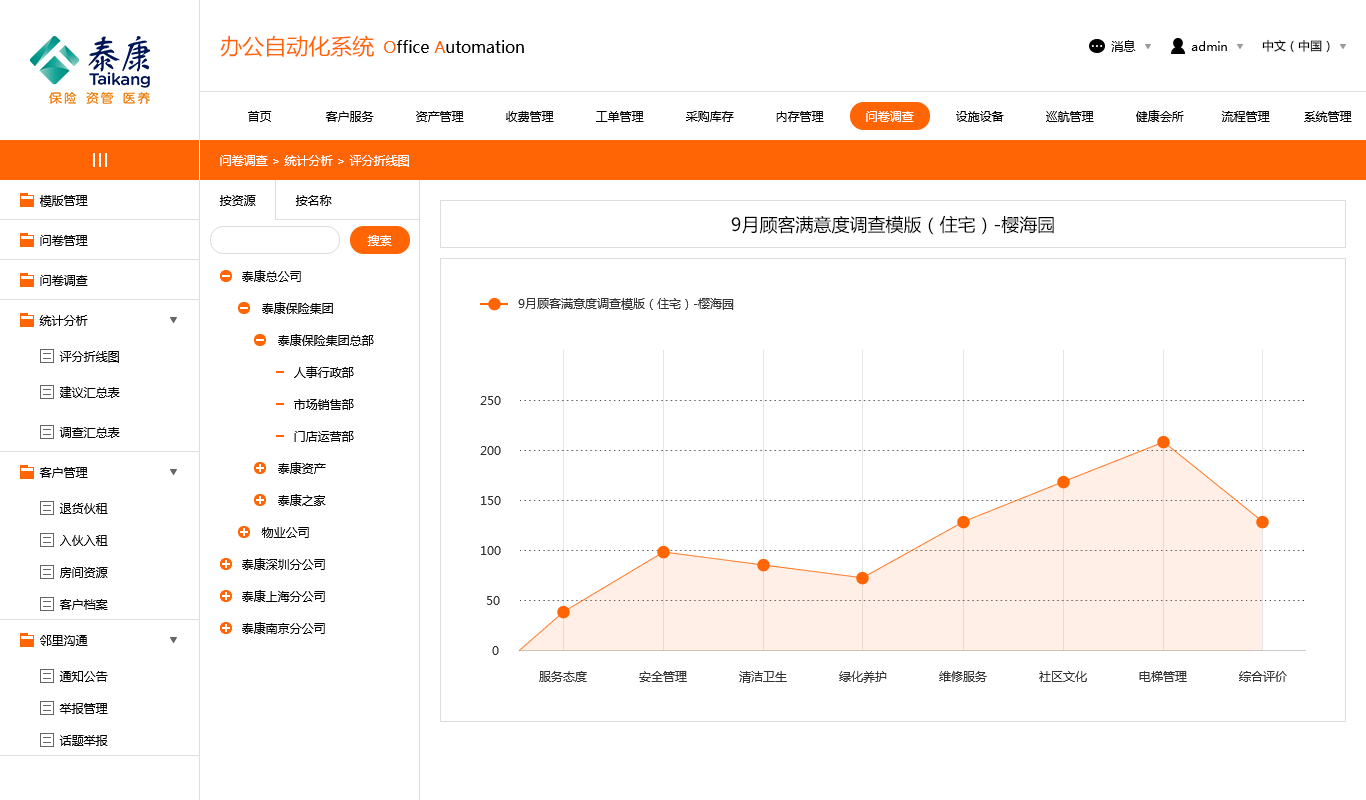
<style>
.page{position:relative;width:1366px;height:800px;background:#ffffff}
.page>*{position:absolute;margin:0}
.t1{font:22px "MicrosoftYaHei";color:#ff6405}
.t2{font:16px "MicrosoftYaHei";color:#000000}
.t3{font:16px "MicrosoftYaHei";color:#ff6405}
.t4{font:12px "MicrosoftYaHei";color:#010101}
.t5{font:12px "MicrosoftYaHei";color:#000000}
.t6{font:12px "MicrosoftYaHei";color:#ffffff}
.t7{font:18px "MicrosoftYaHei";color:#000000}
.t8{font:12px/32px "MicrosoftYaHei";color:#000000}
.t9{font:12px "MicrosoftYaHei";color:#333333}
</style>
<div class="page">
<p class="t1" style="left:220px;top:35px;width:154px;height:22px">办公自动化系统</p>
<p class="t2" style="left:384px;top:40px;width:140px;height:13px"><span class="t3">O</span>ffice<span class="t3"> A</span>utomation</p>
<p class="t4" style="left:1111px;top:40px;width:25px;height:12px">消息</p>
<p class="t5" style="left:1191px;top:41px;width:36px;height:10px">admin</p>
<p class="t5" style="left:1262px;top:39px;width:68px;height:14px">中文（中国）</p>
<p class="t5" style="left:248px;top:111px;width:24px;height:11px">首页</p>
<p class="t5" style="left:325px;top:111px;width:49px;height:11px">客户服务</p>
<p class="t5" style="left:416px;top:111px;width:48px;height:11px">资产管理</p>
<p class="t5" style="left:506px;top:111px;width:48px;height:11px">收费管理</p>
<p class="t5" style="left:596px;top:111px;width:48px;height:11px">工单管理</p>
<p class="t5" style="left:686px;top:111px;width:48px;height:11px">采购库存</p>
<p class="t5" style="left:776px;top:111px;width:48px;height:11px">内存管理</p>
<p class="t6" style="left:866px;top:111px;width:48px;height:11px">问卷调查</p>
<p class="t5" style="left:956px;top:111px;width:48px;height:11px">设施设备</p>
<p class="t5" style="left:1046px;top:111px;width:48px;height:11px">巡航管理</p>
<p class="t5" style="left:1136px;top:110px;width:48px;height:12px">健康会所</p>
<p class="t5" style="left:1221px;top:111px;width:49px;height:11px">流程管理</p>
<p class="t5" style="left:1304px;top:111px;width:48px;height:11px">系统管理</p>
<p class="t6" style="left:220px;top:155px;width:189px;height:12px">问卷调查 &gt; 统计分析 &gt; 评分折线图</p>
<p class="t5" style="left:39px;top:195px;width:49px;height:12px">模版管理</p>
<p class="t5" style="left:219px;top:195px;width:37px;height:11px">按资源</p>
<p class="t4" style="left:295px;top:195px;width:37px;height:11px">按名称</p>
<p class="t7" style="left:731px;top:215px;width:323px;height:20px">9月顾客满意度调查模版（住宅）-樱海园</p>
<p class="t5" style="left:40px;top:235px;width:48px;height:11px">问卷管理</p>
<p class="t6" style="left:367px;top:235px;width:25px;height:11px">搜索</p>
<p class="t8" style="left:242px;top:270px;width:132px;height:364px">泰康总公司<br>     泰康保险集团 <br>         泰康保险集团总部<br>             人事行政部<br>             市场销售部<br>             门店运营部<br>         泰康资产<br>         泰康之家<br>     物业公司<br>泰康深圳分公司<br>泰康上海分公司<br>泰康南京分公司</p>
<p class="t5" style="left:40px;top:275px;width:48px;height:11px">问卷调查</p>
<p class="t9" style="left:518px;top:298px;width:216px;height:12px">9月顾客满意度调查模版（住宅）-樱海园</p>
<p class="t5" style="left:39px;top:315px;width:49px;height:11px">统计分析</p>
<p class="t5" style="left:59px;top:351px;width:60px;height:12px">评分折线图</p>
<p class="t5" style="left:60px;top:386px;width:60px;height:12px">建议汇总表</p>
<p class="t9" style="left:480px;top:396px;width:21px;height:9px">250</p>
<p class="t5" style="left:59px;top:427px;width:61px;height:11px">调查汇总表</p>
<p class="t9" style="left:480px;top:446px;width:21px;height:9px">200</p>
<p class="t5" style="left:39px;top:467px;width:49px;height:11px">客户管理</p>
<p class="t9" style="left:481px;top:496px;width:20px;height:9px">150</p>
<p class="t5" style="left:59px;top:503px;width:49px;height:11px">退货伙租</p>
<p class="t5" style="left:60px;top:535px;width:48px;height:11px">入伙入租</p>
<p class="t9" style="left:481px;top:546px;width:20px;height:9px">100</p>
<p class="t5" style="left:60px;top:567px;width:48px;height:11px">房间资源</p>
<p class="t5" style="left:59px;top:599px;width:49px;height:11px">客户档案</p>
<p class="t9" style="left:487px;top:596px;width:13px;height:9px">50</p>
<p class="t5" style="left:40px;top:635px;width:48px;height:11px">邻里沟通</p>
<p class="t9" style="left:492px;top:646px;width:7px;height:9px">0</p>
<p class="t5" style="left:59px;top:671px;width:49px;height:11px">通知公告</p>
<p class="t9" style="left:539px;top:671px;width:48px;height:11px">服务态度</p>
<p class="t9" style="left:639px;top:671px;width:48px;height:11px">安全管理</p>
<p class="t9" style="left:739px;top:671px;width:48px;height:12px">清洁卫生</p>
<p class="t9" style="left:839px;top:671px;width:48px;height:12px">绿化养护</p>
<p class="t9" style="left:939px;top:671px;width:48px;height:11px">维修服务</p>
<p class="t9" style="left:1039px;top:671px;width:48px;height:11px">社区文化</p>
<p class="t9" style="left:1139px;top:671px;width:48px;height:11px">电梯管理</p>
<p class="t9" style="left:1239px;top:671px;width:48px;height:11px">综合评价</p>
<p class="t5" style="left:59px;top:703px;width:49px;height:11px">举报管理</p>
<p class="t5" style="left:59px;top:735px;width:49px;height:11px">话题举报</p>
</div>
